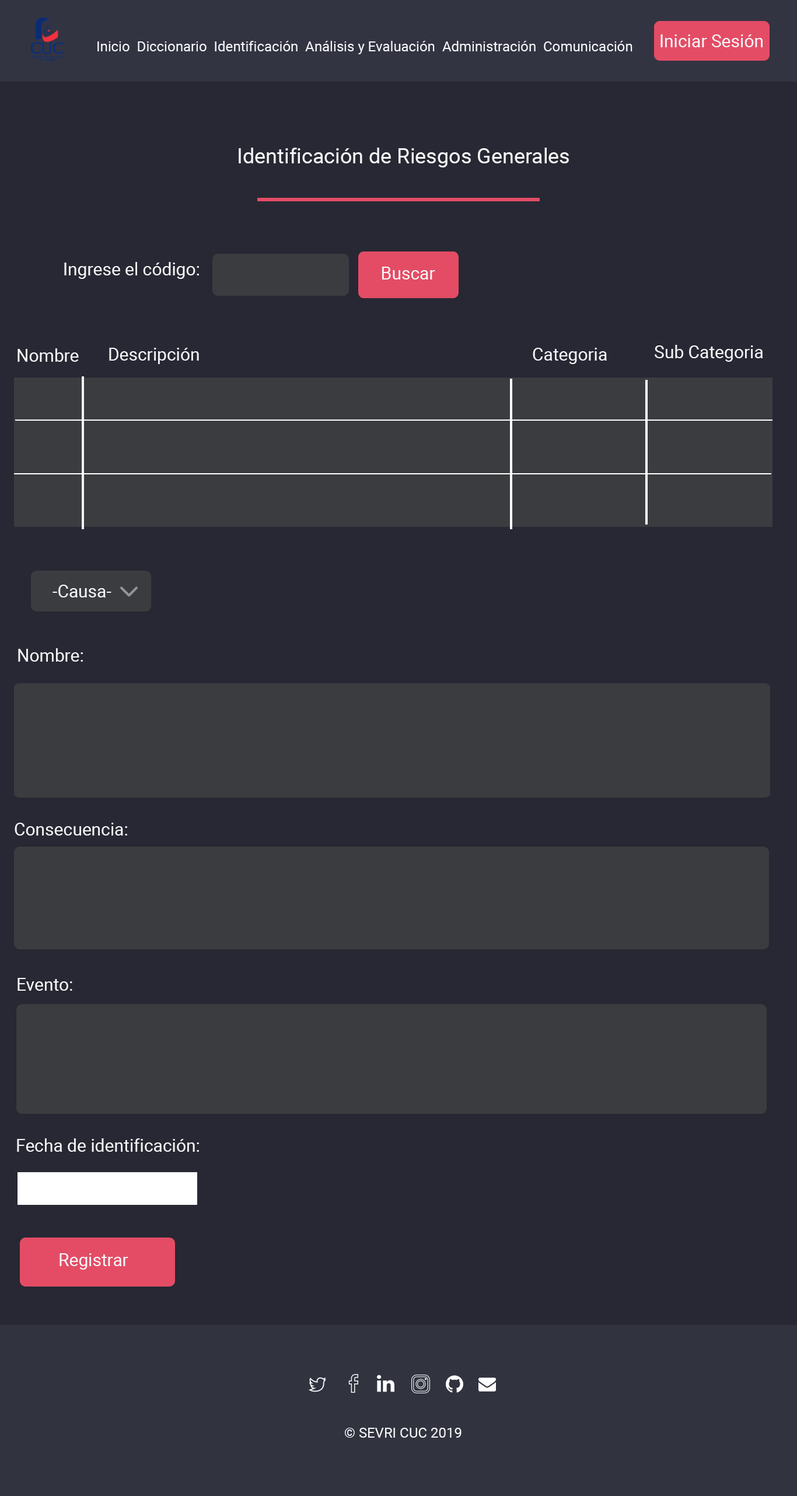
<style>
.page{position:relative;width:797px;height:1496px;background:#272833}
.page>*{position:absolute;margin:0}
.t1{font:14px "Roboto-Regular";color:#f6f6f9}
.t2{font:17.5px "Roboto-Regular";color:#f6f6f9}
.t3{font:21px "Roboto-Regular";color:#f6f6f9}
</style>
<div class="page">
<p class="t1" style="left:97px;top:41px;width:536px;height:13px">Inicio  Diccionario  Identificación  Análisis y Evaluación  Administración  Comunicación</p>
<p class="t2" style="left:661px;top:34px;width:102px;height:13px">Iniciar Sesión</p>
<p class="t3" style="left:239px;top:148px;width:330px;height:19px">Identificación de Riesgos Generales</p>
<p class="t2" style="left:64px;top:262px;width:135px;height:17px">Ingrese el código:</p>
<p class="t2" style="left:382px;top:267px;width:53px;height:12px">Buscar</p>
<p class="t2" style="left:18px;top:348px;width:61px;height:14px">Nombre</p>
<p class="t2" style="left:109px;top:348px;width:90px;height:16px">Descripción</p>
<p class="t2" style="left:533px;top:348px;width:74px;height:16px">Categoria</p>
<p class="t2" style="left:655px;top:345px;width:108px;height:17px">Sub Categoria</p>
<p class="t2" style="left:53px;top:585px;width:58px;height:12px">-Causa-</p>
<p class="t2" style="left:18px;top:648px;width:65px;height:14px">Nombre:</p>
<p class="t2" style="left:15px;top:823px;width:112px;height:13px">Consecuencia:</p>
<p class="t2" style="left:18px;top:978px;width:54px;height:13px">Evento:</p>
<p class="t2" style="left:17px;top:1138px;width:182px;height:14px">Fecha de identificación:</p>
<p class="t2" style="left:60px;top:1253px;width:68px;height:17px">Registrar</p>
<p class="t1" style="left:345px;top:1428px;width:117px;height:10px">© SEVRI CUC 2019</p>
</div>
